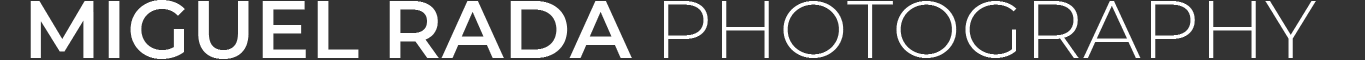
<style>
.page{position:relative;width:1365px;height:60px;background:#333333}
.page>*{position:absolute;margin:0}
.t1{font:82px "Montserrat-SemiBold";color:#ffffff}
.t2{font:82px "Montserrat-Light";color:#ffffff}
</style>
<div class="page">
<p class="t1" style="left:30px;top:0px;width:1286px;height:59px">MIGUEL RADA <span class="t2">PHOTOGRAPHY</span></p>
</div>
